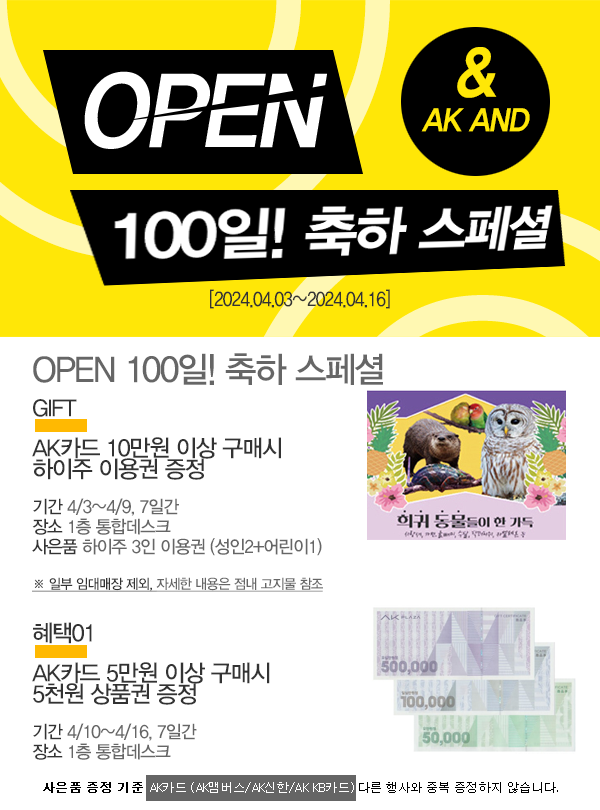
<style>
.page{position:relative;width:600px;height:810px;background:#ffffff}
.page>*{position:absolute;margin:0}
.t1{font:30.5px "YDIYGO350";letter-spacing:-0.05em;color:#ffe707;font-style:italic;scale:0.95 1}
.t2{font:64.4px "YDIYGO350";letter-spacing:-0.05em;color:#ffe707;font-style:italic;scale:0.95 1}
.t3{font:19.8px "YDIYGO330";letter-spacing:-0.05em;color:#333333;scale:0.86 1}
.t4{font:17.8px/19.8px "YDIYGO330";letter-spacing:-0.05em;color:#666666;scale:0.96 1}
.t5{font:35.6px "YDIYGO330";letter-spacing:-0.05em;color:#666666;scale:0.96 1}
.t6{font:23.8px/16.2px "YDIYGO330";letter-spacing:-0.05em;color:#333333;scale:0.96 1}
.t7{font:23.8px/39.6px "YDIYGO330";letter-spacing:-0.05em;color:#333333;scale:0.96 1}
.t8{font:23.8px/21.6px "YDIYGO330";letter-spacing:-0.05em;color:#333333;scale:0.96 1}
.t9{font:17.8px/36px "YDIYGO330";letter-spacing:-0.05em;color:#333333;scale:0.96 1}
.t10{font:17.8px/36px "YDIYGO330";letter-spacing:-0.05em;color:#666666;scale:0.96 1}
.t11{font:17.8px/19.8px "YDIYGO330";letter-spacing:-0.05em;color:#333333;scale:0.96 1}
.t12{font:13.9px/36px "YDIYGO330";letter-spacing:-0.05em;color:#333333;text-decoration:underline;scale:0.96 1}
.t13{font:13.9px/36px "YDIYGO330";letter-spacing:-0.05em;color:#666666;text-decoration:underline;scale:0.96 1}
.t14{font:13px "Dotum";letter-spacing:-0.05em;color:#ffffff}
.t15{font:13px "Dotum";letter-spacing:-0.05em;color:#000000;font-weight:bold}
.t16{font:13px "Dotum";letter-spacing:-0.05em;color:#000000}
</style>
<div class="page">
<p class="t1" style="left:421px;top:47px;width:109px;height:85px;text-align:center"><span class="t2">&amp;<br></span>AK AND</p>
<p class="t3" style="left:210px;top:289px;width:180px;height:20px">[2024.04.03~2024.04.16]</p>
<p class="t4" style="left:32px;top:353px;width:351px;height:407px"><span class="t5">OPEN 100일! 축하 스페셜<br><br></span><span class="t6">GIFT<br></span><span class="t7">AK카드 10만원 이상 구매시<br></span><span class="t8">하이주 이용권 증정<br></span><span class="t9">기간 </span><span class="t10">4/3~4/9, 7일간<br></span><span class="t11">장소 </span>1층 통합데스크<br><span class="t11">사은품 </span>하이주 3인 이용권 (성인2+어린이1)<br><span class="t12">※ 일부 임대매장 제외, </span><span class="t13">자세한 내용은 점내 고지물 참조<br><br></span><span class="t6">혜택01<br></span><span class="t7">AK카드 5만원 이상 구매시<br></span><span class="t8">5천원 상품권 증정<br></span><span class="t9">기간 </span><span class="t10">4/10~4/16, 7일간<br></span><span class="t11">장소 </span>1층 통합데스크</p>
<p class="t14" style="left:43px;top:782px;width:515px;height:11px"><span class="t15">사은품 증정 기준 </span>AK카드 (AK맴버스/AK신한/AK KB카드) <span class="t16">다른 행사와 중복 증정하지 않습니다.</span></p>
</div>
